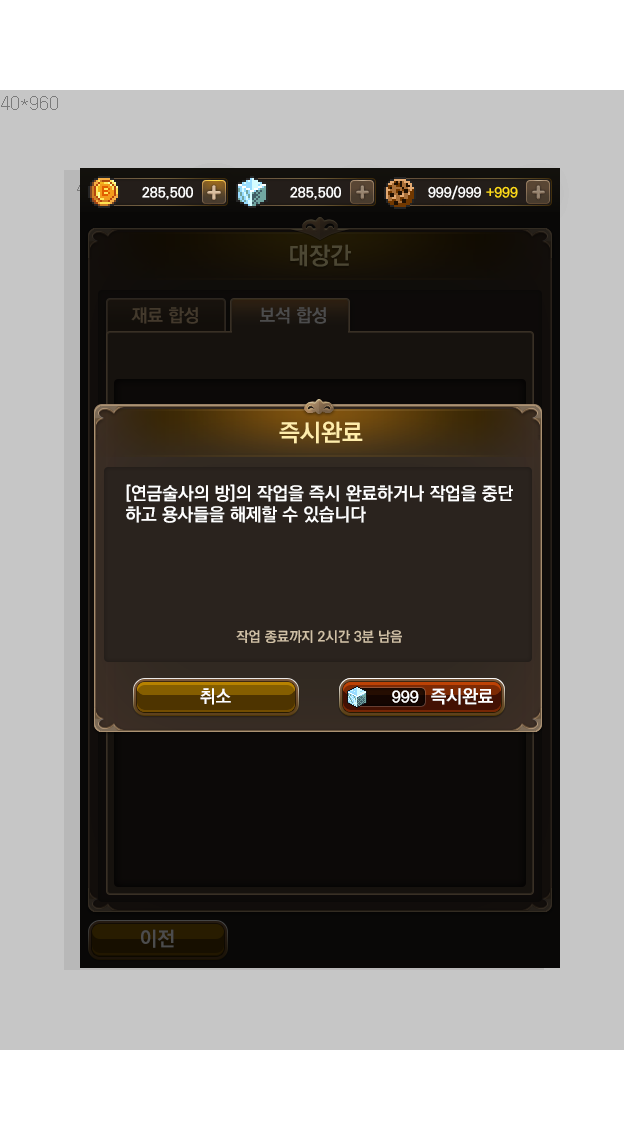
<style>
.page{position:relative;width:640px;height:1136px;background:#c6c6c6}
.page>*{position:absolute;margin:0}
.t1{font:24px "KoPubDotumBold";color:#4c4733}
.t2{font:18px "KoPubDotumBold";color:#43392c}
.t3{font:18px "KoPubDotumBold";color:#4c4c4c}
.t4{font:24px "KoPubDotumBold";color:#ffedab}
.t5{font:18px "KoPubDotumBold";color:#ffffff}
.t6{font:14px "KoPubDotumBold";color:#d0c0a6}
.t7{font:16px "KoPubDotumBold";color:#ffffff}
</style>
<div class="page">
<p class="t1" style="left:290px;top:244px;width:61px;height:23px">대장간</p>
<p class="t2" style="left:131px;top:307px;width:67px;height:17px">재료 합성</p>
<p class="t3" style="left:260px;top:307px;width:66px;height:17px">보석 합성</p>
<p class="t4" style="left:279px;top:421px;width:84px;height:23px">즉시완료</p>
<p class="t5" style="left:126px;top:484px;width:387px;height:39px">[연금술사의 방]의 작업을 즉시 완료하거나 작업을 중단<br>하고 용사들을 해제할 수 있습니다</p>
<p class="t6" style="left:236px;top:630px;width:166px;height:13px">작업 종료까지 2시간 3분 남음</p>
<p class="t5" style="left:200px;top:688px;width:31px;height:17px">취소</p>
<p class="t5" style="left:431px;top:688px;width:62px;height:17px">즉시완료</p>
<p class="t7" style="left:392px;top:690px;width:27px;height:13px">999</p>
</div>
